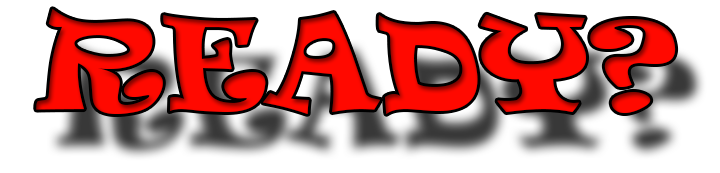
<style>
.page{position:relative;width:720px;height:173px;background:#ffffff}
.page>*{position:absolute;margin:0}
.t1{font:120px "Ravie";color:#ff1300}
</style>
<div class="page">
<p class="t1" style="left:36px;top:9px;width:640px;height:105px">READY?</p>
</div>
